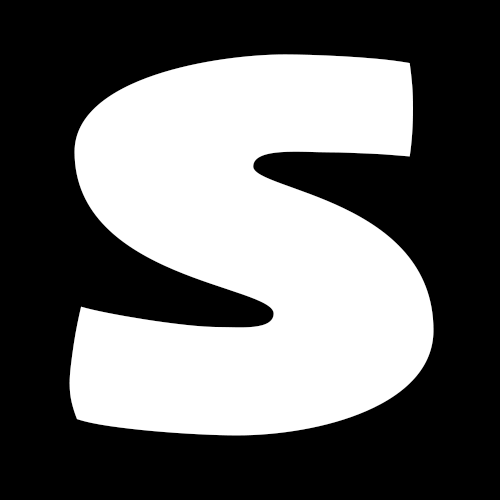
<style>
.page{position:relative;width:500px;height:500px;background:#000000}
.page>*{position:absolute;margin:0}
.t1{font:520.5px "VaultRegular";color:#ffffff}
</style>
<div class="page">
<p class="t1" style="left:69px;top:54px;width:365px;height:382px">S</p>
</div>
